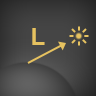
<style>
.page{position:relative;width:96px;height:96px}
.page>*{position:absolute;margin:0}
.t1{font:24px "Arial-BoldMT";color:#e6c260}
</style>
<div class="page">
<p class="t1" style="left:32px;top:28px;width:13px;height:17px">L</p>
</div>
